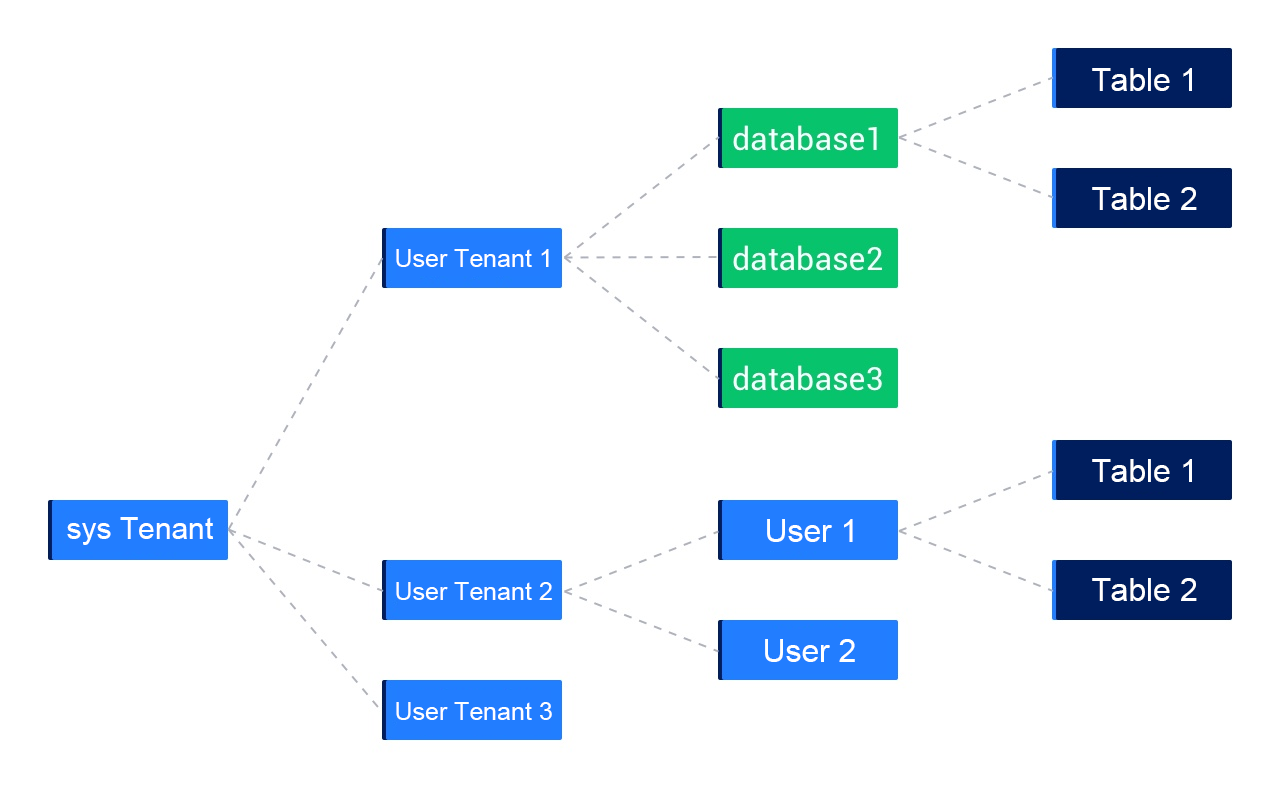
<style>
.page{position:relative;width:1280px;height:788px;background:#ffffff}
.page>*{position:absolute;margin:0}
.t1{font:31.8px "ArialMT";color:#ffffff}
.t2{font:25px "ArialMT";color:#ffffff}
.t3{font:30px "ArialMT";color:#ffffff}
</style>
<div class="page">
<p class="t1" style="left:1092px;top:68px;width:100px;height:23px">Table 1</p>
<p class="t1" style="left:1092px;top:187px;width:105px;height:23px">Table 2</p>
<p class="t2" style="left:396px;top:249px;width:153px;height:18px">User Tenant 1</p>
<p class="t1" style="left:1092px;top:459px;width:100px;height:23px">Table 1</p>
<p class="t3" style="left:67px;top:517px;width:146px;height:28px">sys Tenant</p>
<p class="t1" style="left:767px;top:519px;width:86px;height:23px">User 1</p>
<p class="t2" style="left:396px;top:582px;width:156px;height:18px">User Tenant 2</p>
<p class="t1" style="left:1092px;top:578px;width:105px;height:23px">Table 2</p>
<p class="t1" style="left:765px;top:639px;width:90px;height:23px">User 2</p>
<p class="t2" style="left:396px;top:702px;width:156px;height:18px">User Tenant 3</p>
</div>
